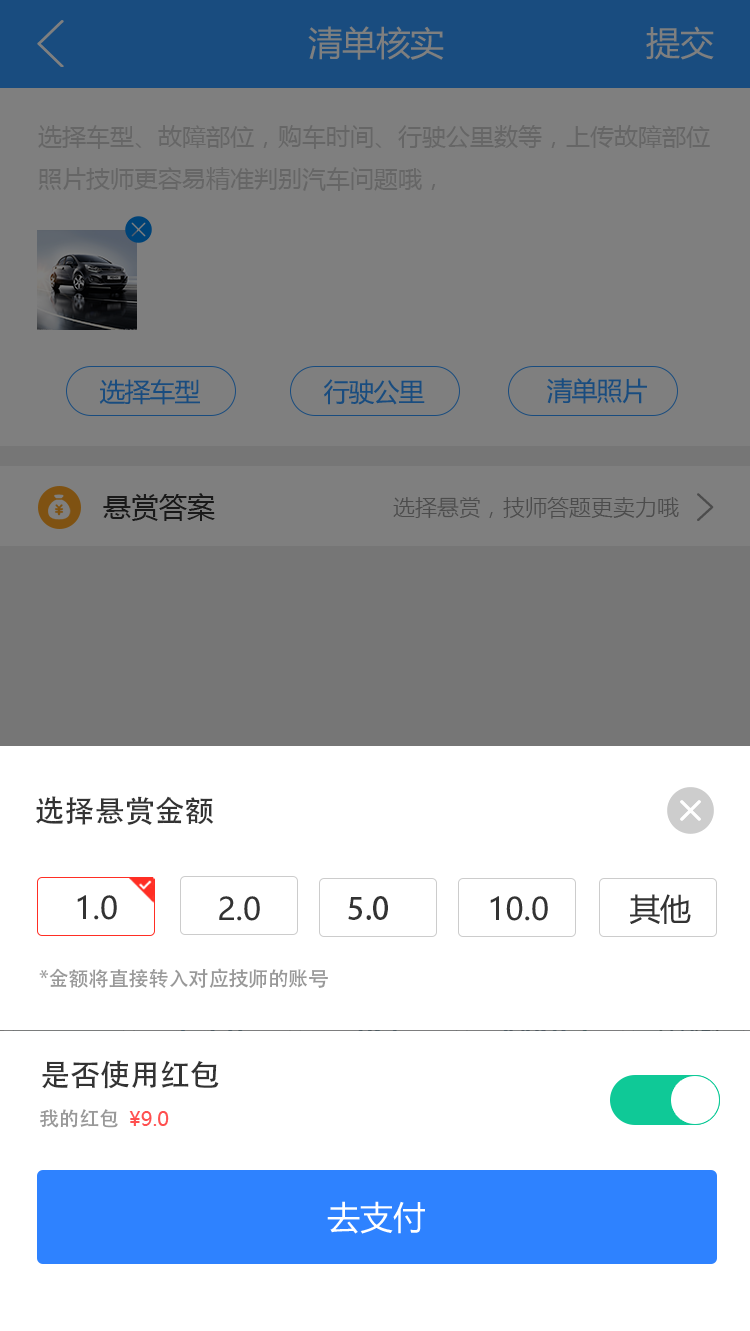
<style>
.page{position:relative;width:750px;height:1331px;background:#ffffff}
.page>*{position:absolute;margin:0}
.t1{font:34px "MicrosoftYaHei";color:#7f7f7f}
.t2{font:24px "MicrosoftYaHei";color:#666666}
.t3{font:26px "MicrosoftYaHei";letter-spacing:-0.04em;color:#194c7f}
.t4{font:28px "MicrosoftYaHei";color:#191919}
.t5{font:22px "MicrosoftYaHeiLight";color:#4c4c4c}
.t6{font:30px "AdobeHeitiStd-Regular";color:#333333}
.t7{font:30.7px "MicrosoftYaHei";color:#333333}
.t8{font:30.7px "AdobeHeitiStd-Regular";color:#333333}
.t9{font:20px "AdobeHeitiStd-Regular";color:#999999}
.t10{font:20px "MicrosoftYaHei";color:#ff5050}
.t11{font:32.9px "MicrosoftYaHei";color:#ffffff}
</style>
<div class="page">
<p class="t1" style="left:308px;top:26px;width:136px;height:34px">清单核实</p>
<p class="t1" style="left:646px;top:26px;width:68px;height:34px">提交</p>
<p class="t2" style="left:38px;top:125px;width:672px;height:66px">选择车型、故障部位，购车时间、行驶公里数等，上传故障部位照片技师更容易精准判别汽车问题哦，</p>
<p class="t3" style="left:99px;top:379px;width:101px;height:26px">选择车型</p>
<p class="t3" style="left:324px;top:379px;width:101px;height:26px">行驶公里</p>
<p class="t3" style="left:547px;top:378px;width:100px;height:26px">清单照片</p>
<p class="t4" style="left:103px;top:493px;width:112px;height:28px">悬赏答案</p>
<p class="t5" style="left:393px;top:497px;width:286px;height:22px">选择悬赏，技师答题更卖力哦</p>
<p class="t6" style="left:36px;top:796px;width:178px;height:29px">选择悬赏金额</p>
<p class="t7" style="left:630px;top:894px;width:61px;height:30px">其他</p>
<p class="t7" style="left:77px;top:895px;width:40px;height:25px">1.0</p>
<p class="t7" style="left:219px;top:896px;width:41px;height:25px">2.0</p>
<p class="t8" style="left:348px;top:896px;width:40px;height:24px">5.0</p>
<p class="t7" style="left:490px;top:896px;width:58px;height:25px">10.0</p>
<p class="t9" style="left:39px;top:968px;width:289px;height:20px">*金额将直接转入对应技师的账号</p>
<p class="t6" style="left:42px;top:1060px;width:177px;height:29px">是否使用红包</p>
<p class="t9" style="left:40px;top:1109px;width:78px;height:19px">我的红包</p>
<p class="t10" style="left:129px;top:1111px;width:40px;height:15px">¥9.0</p>
<p class="t11" style="left:327px;top:1201px;width:98px;height:33px">去支付</p>
</div>
